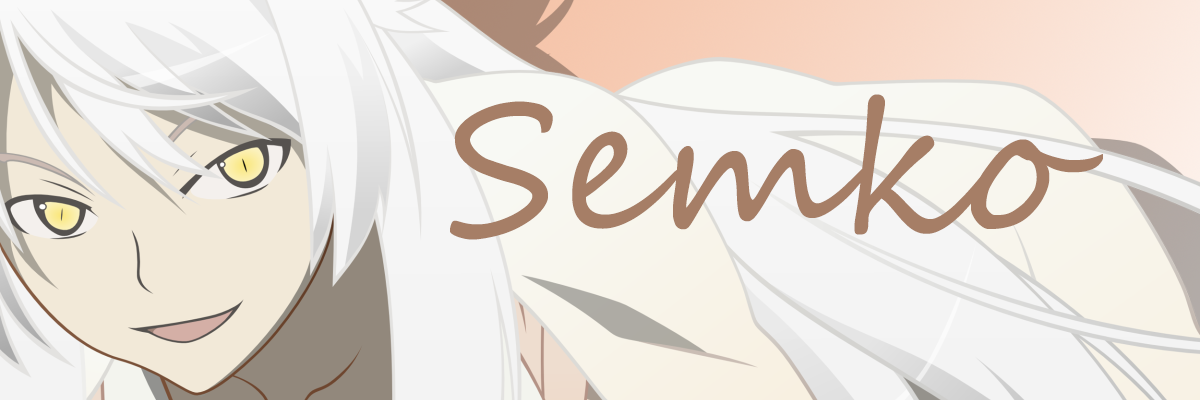
<style>
.page{position:relative;width:1200px;height:400px}
.page>*{position:absolute;margin:0}
.t1{font:182px "SegoeScript";color:#a67e66}
</style>
<div class="page">
<p class="t1" style="left:450px;top:94px;width:653px;height:146px">Semko</p>
</div>
